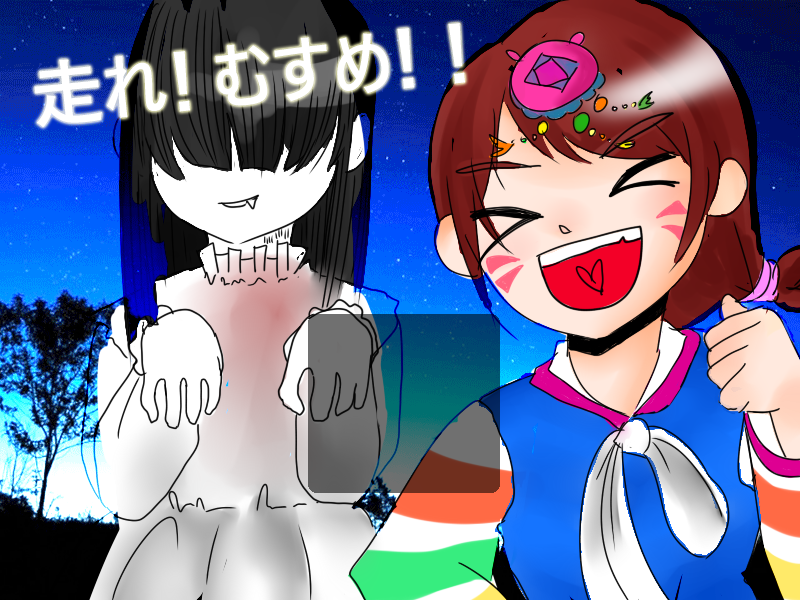
<style>
.page{position:relative;width:800px;height:600px}
.page>*{position:absolute;margin:0}
.t1{font:72px "YuGothicUI-Semibold";letter-spacing:-0.3em;color:#ffffff}
.t2{font:72px "YuGothicUI-Semibold";color:#ffffff}
</style>
<div class="page">
<p class="t1" style="left:34px;top:23px;width:431px;height:104px;rotate:-6deg"><span class="t2">走</span>れ！  <span class="t2"> むす</span>め！！</p>
</div>
